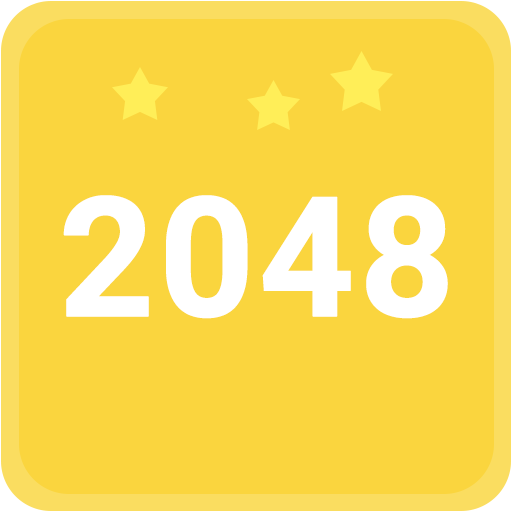
<style>
.page{position:relative;width:512px;height:512px;background:#fad53e}
.page>*{position:absolute;margin:0}
.t1{font:166.7px "Roboto-Bold";color:#ffffff;font-weight:bold}
</style>
<div class="page">
<p class="t1" style="left:63px;top:195px;width:385px;height:124px">2048</p>
</div>
